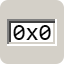
<style>
.page{position:relative;width:64px;height:64px;background:#d4d0c8}
.page>*{position:absolute;margin:0}
.t1{font:24px "Consolas";color:#080808}
</style>
<div class="page">
<p class="t1" style="left:13px;top:25px;width:38px;height:15px">0x0</p>
</div>
